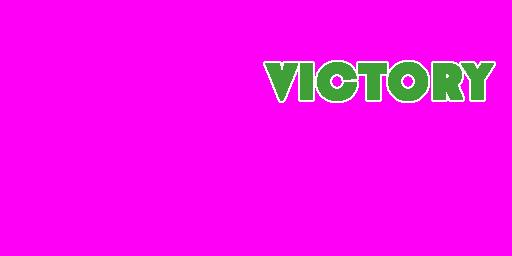
<style>
.page{position:relative;width:512px;height:256px;background:#ff00f6}
.page>*{position:absolute;margin:0}
.t1{font:54.1px "Bauhaus93";color:#3ea037;font-weight:bold}
</style>
<div class="page">
<p class="t1" style="left:265px;top:62px;width:229px;height:39px">VICTORY</p>
</div>
